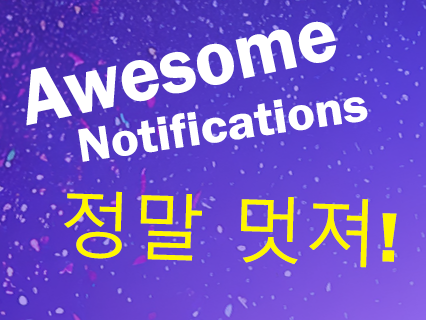
<style>
.page{position:relative;width:426px;height:320px}
.page>*{position:absolute;margin:0}
.t1{font:79.5px "FranklinGothic-Demi";color:#ffffff;scale:0.96 1}
.t2{font:48.4px "FranklinGothic-Demi";color:#ffffff;scale:1.08 1}
.t3{font:72px "MalgunGothic";color:#fff600}
.t4{font:72px "FranklinGothic-Demi";color:#fff600}
</style>
<div class="page">
<p class="t1" style="left:26px;top:21px;width:310px;height:105px;rotate:-12deg">Awesome</p>
<p class="t2" style="left:78px;top:97px;width:290px;height:65px;rotate:-8deg">Notifications</p>
<p class="t3" style="left:64px;top:191px;width:333px;height:77px;rotate:2deg">정말 멋져<span class="t4">!</span></p>
</div>
